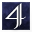
<style>
.page{position:relative;width:32px;height:32px}
.page>*{position:absolute;margin:0}
.t1{font:41.6px "ColonnaMT";color:#ffffff}
</style>
<div class="page">
<p class="t1" style="left:5px;top:3px;width:21px;height:26px">4</p>
</div>
